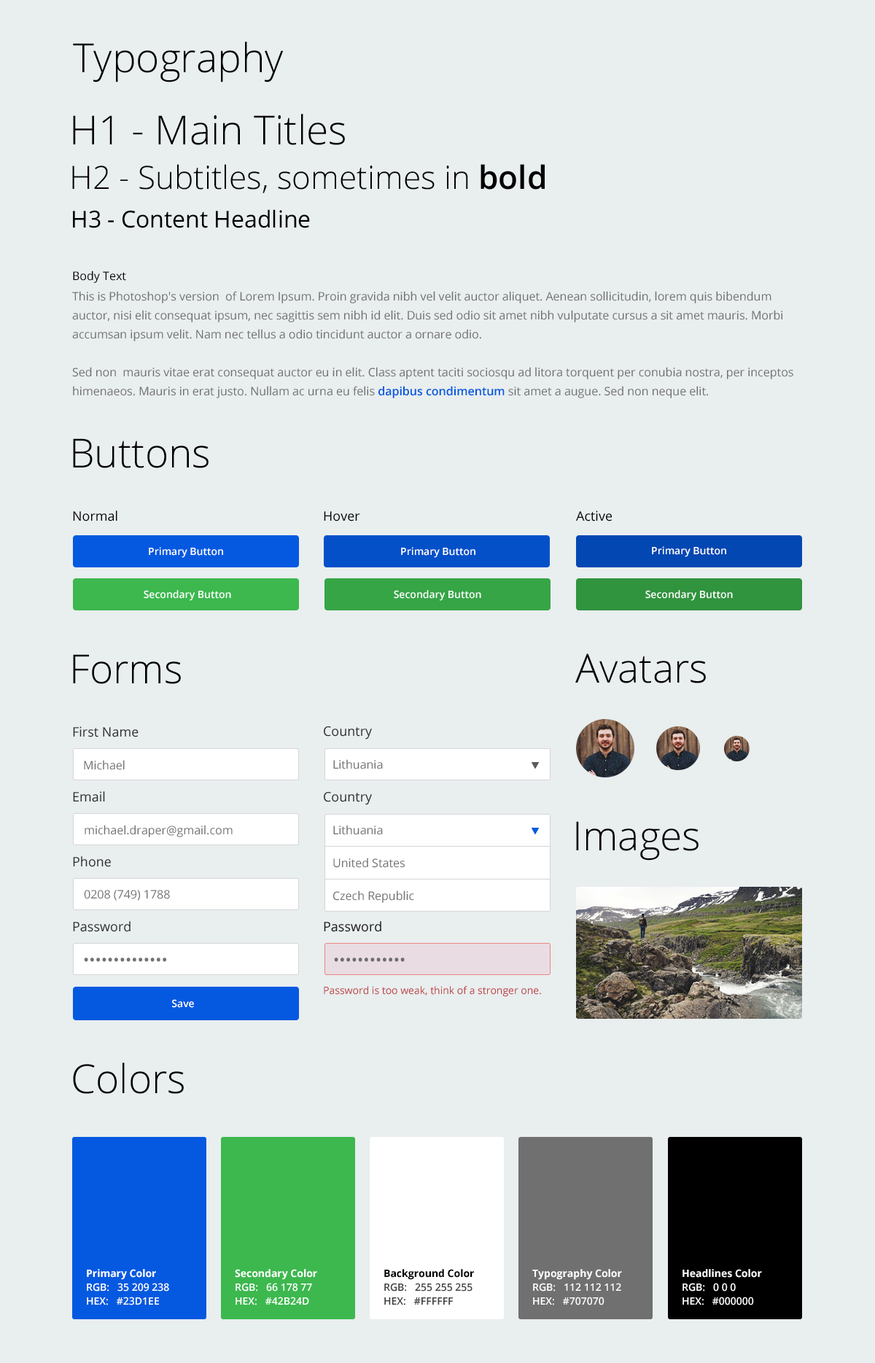
<style>
.page{position:relative;width:875px;height:1363px;background:#e9eeef}
.page>*{position:absolute;margin:0}
.t1{font:40.1px "OpenSans-Light";color:#000000}
.t2{font:32.1px "OpenSans-Light";color:#000000}
.t3{font:32.1px "OpenSans-Semibold";color:#000000}
.t4{font:23.3px "OpenSans";color:#000000}
.t5{font:11.7px/19px "OpenSans";color:#707070}
.t6{font:11.7px/17.5px "OpenSans";color:#000000}
.t7{font:11.7px/20.4px "OpenSans";color:#707070}
.t8{font:11.7px/19px "OpenSans-Semibold";color:#0459e0}
.t9{font:13.1px "OpenSans";color:#000000}
.t10{font:10.2px "OpenSans-Semibold";color:#ffffff}
.t11{font:13.1px "OpenSans";color:#2b2c2c}
.t12{font:11.7px "OpenSans";color:#5a5a5a}
.t13{font:13.1px "OpenSans";color:#1c1d1d}
.t14{font:16px "OpenSans";color:#5a5a5a}
.t15{font:10.2px "OpenSans";color:#b63131}
.t16{font:10.2px/13.9px "OpenSans-Semibold";color:#ffffff}
.t17{font:10.2px/13.9px "OpenSans-Bold";color:#ffffff}
.t18{font:10.2px/13.9px "OpenSans-Semibold";color:#414141}
.t19{font:10.2px/13.9px "OpenSans-Bold";color:#000000}
</style>
<div class="page">
<p class="t1" style="left:73px;top:42px;width:211px;height:40px">Typography</p>
<p class="t1" style="left:73px;top:114px;width:272px;height:31px">H1 - Main Titles</p>
<p class="t2" style="left:72px;top:164px;width:473px;height:29px">H2 - Subtitles, sometimes in <span class="t3">bold</span></p>
<p class="t4" style="left:73px;top:209px;width:237px;height:19px">H3 - Content Headline</p>
<p class="t5" style="left:72px;top:271px;width:721px;height:127px"><span class="t6">Body Text<br></span><span class="t7">This is Photoshop's version  of Lorem Ipsum. Proin gravida nibh vel velit auctor aliquet. Aenean sollicitudin, lorem quis bibendum </span>auctor, nisi elit consequat ipsum, nec sagittis sem nibh id elit. Duis sed odio sit amet nibh vulputate cursus a sit amet mauris. Morbi accumsan ipsum velit. Nam nec tellus a odio tincidunt auctor a ornare odio.<br><br>Sed non  mauris vitae erat consequat auctor eu in elit. Class aptent taciti sociosqu ad litora torquent per conubia nostra, per inceptos himenaeos. Mauris in erat justo. Nullam ac urna eu felis <span class="t8">dapibus condimentum</span> sit amet a augue. Sed non neque elit.</p>
<p class="t1" style="left:73px;top:438px;width:136px;height:30px">Buttons</p>
<p class="t9" style="left:73px;top:510px;width:44px;height:11px">Normal</p>
<p class="t9" style="left:324px;top:511px;width:36px;height:10px">Hover</p>
<p class="t9" style="left:576px;top:510px;width:36px;height:11px">Active</p>
<p class="t10" style="left:149px;top:547px;width:74px;height:11px">Primary Button</p>
<p class="t10" style="left:401px;top:547px;width:74px;height:11px">Primary Button</p>
<p class="t10" style="left:652px;top:546px;width:74px;height:11px">Primary Button</p>
<p class="t10" style="left:144px;top:590px;width:87px;height:11px">Secondary Button</p>
<p class="t10" style="left:394px;top:590px;width:87px;height:11px">Secondary Button</p>
<p class="t10" style="left:645px;top:590px;width:88px;height:11px">Secondary Button</p>
<p class="t1" style="left:575px;top:653px;width:131px;height:30px">Avatars</p>
<p class="t1" style="left:73px;top:654px;width:108px;height:30px">Forms</p>
<p class="t11" style="left:73px;top:726px;width:66px;height:11px">First Name</p>
<p class="t11" style="left:324px;top:726px;width:48px;height:13px">Country</p>
<p class="t12" style="left:84px;top:760px;width:41px;height:10px;opacity:0.88">Michael</p>
<p class="t12" style="left:333px;top:759px;width:50px;height:10px;opacity:0.88">Lithuania</p>
<p class="t11" style="left:73px;top:791px;width:32px;height:11px">Email</p>
<p class="t11" style="left:324px;top:792px;width:48px;height:13px">Country</p>
<p class="t1" style="left:576px;top:821px;width:123px;height:39px">Images</p>
<p class="t12" style="left:85px;top:825px;width:148px;height:12px;opacity:0.88">michael.draper@gmail.com</p>
<p class="t12" style="left:333px;top:825px;width:50px;height:10px;opacity:0.88">Lithuania</p>
<p class="t11" style="left:73px;top:856px;width:38px;height:11px">Phone</p>
<p class="t12" style="left:333px;top:857px;width:72px;height:11px;opacity:0.88">United States</p>
<p class="t12" style="left:84px;top:890px;width:86px;height:11px;opacity:0.88">0208 (749) 1788</p>
<p class="t12" style="left:333px;top:890px;width:81px;height:13px;opacity:0.88">Czech Republic</p>
<p class="t11" style="left:73px;top:921px;width:58px;height:11px">Password</p>
<p class="t13" style="left:324px;top:921px;width:57px;height:11px">Password</p>
<p class="t14" style="left:84px;top:957px;width:82px;height:5px;opacity:0.88">••••••••••••••</p>
<p class="t14" style="left:334px;top:957px;width:71px;height:5px;opacity:0.88">••••••••••••</p>
<p class="t15" style="left:324px;top:986px;width:217px;height:11px;opacity:0.88">Password is too weak, think of a stronger one.</p>
<p class="t10" style="left:172px;top:999px;width:22px;height:9px">Save</p>
<p class="t1" style="left:73px;top:1062px;width:111px;height:32px">Colors</p>
<p class="t16" style="left:87px;top:1269px;width:82px;height:36px"><span class="t17">Primary Color<br></span>RGB:   35 209 238<br>HEX:   #23D1EE</p>
<p class="t16" style="left:235px;top:1269px;width:82px;height:36px"><span class="t17">Secondary Color<br></span>RGB:   66 178 77<br>HEX:   #42B24D</p>
<p class="t18" style="left:384px;top:1269px;width:90px;height:36px"><span class="t19">Background Color<br></span>RGB:   255 255 255<br>HEX:   #FFFFFF</p>
<p class="t16" style="left:532px;top:1269px;width:90px;height:36px"><span class="t17">Typography Color<br></span>RGB:   112 112 112<br>HEX:   #707070</p>
<p class="t16" style="left:682px;top:1269px;width:80px;height:36px"><span class="t17">Headlines Color<br></span>RGB:   0 0 0<br>HEX:   #000000</p>
</div>
